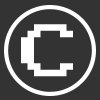
<style>
.page{position:relative;width:100px;height:100px;background:#333333}
.page>*{position:absolute;margin:0}
.t1{font:83.3px "WST_Germ";letter-spacing:0.075em;color:#ffffff}
</style>
<div class="page">
<p class="t1" style="left:21px;top:24px;width:52px;height:53px">C</p>
</div>
